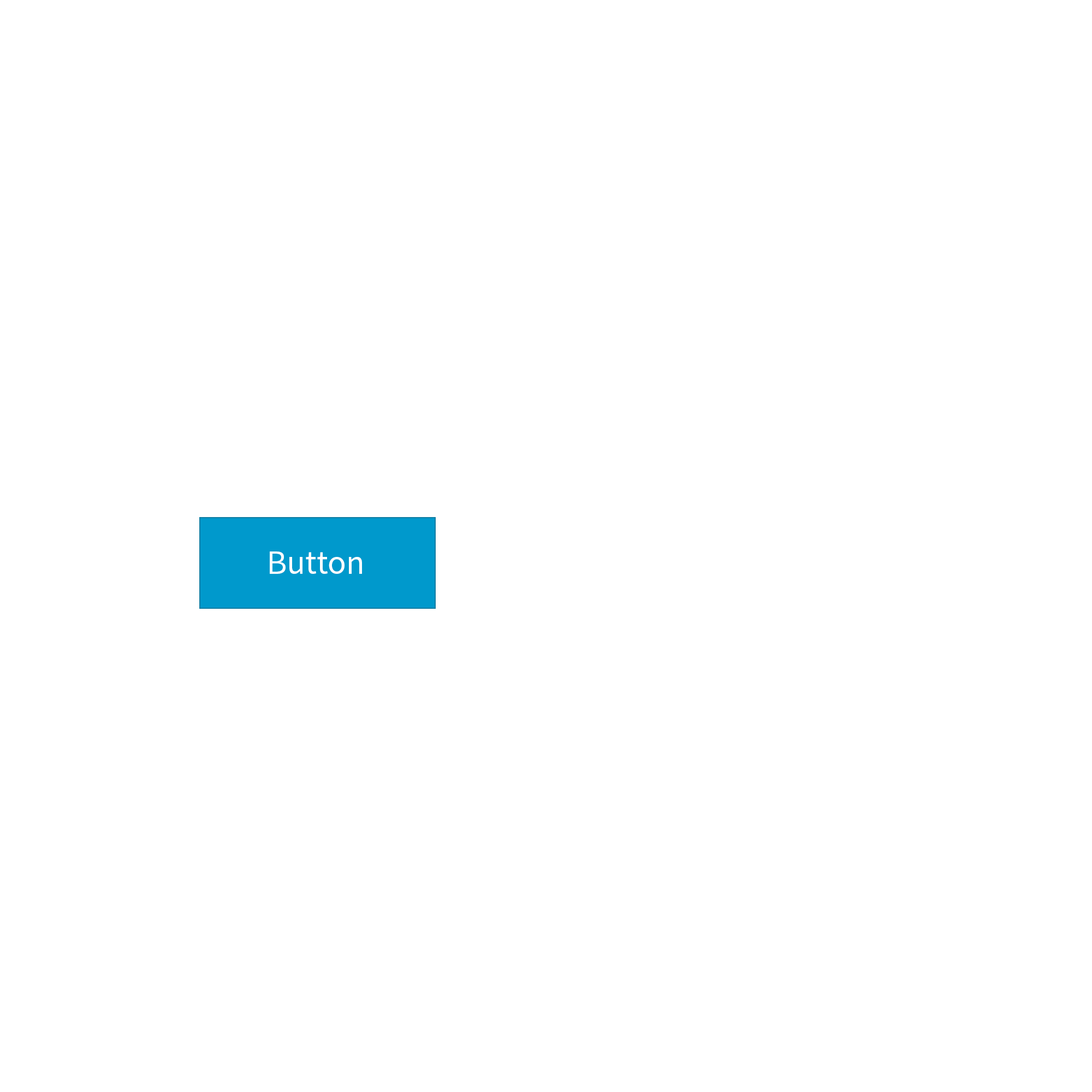
<style>
.page{position:relative;width:1092px;height:1092px;background:#ffffff}
.page>*{position:absolute;margin:0}
.t1{font:33.9px "SourceSansPro-Regular";color:#ffffff}
</style>
<div class="page">
<p class="t1" style="left:270px;top:551px;width:92px;height:23px">Button</p>
</div>
